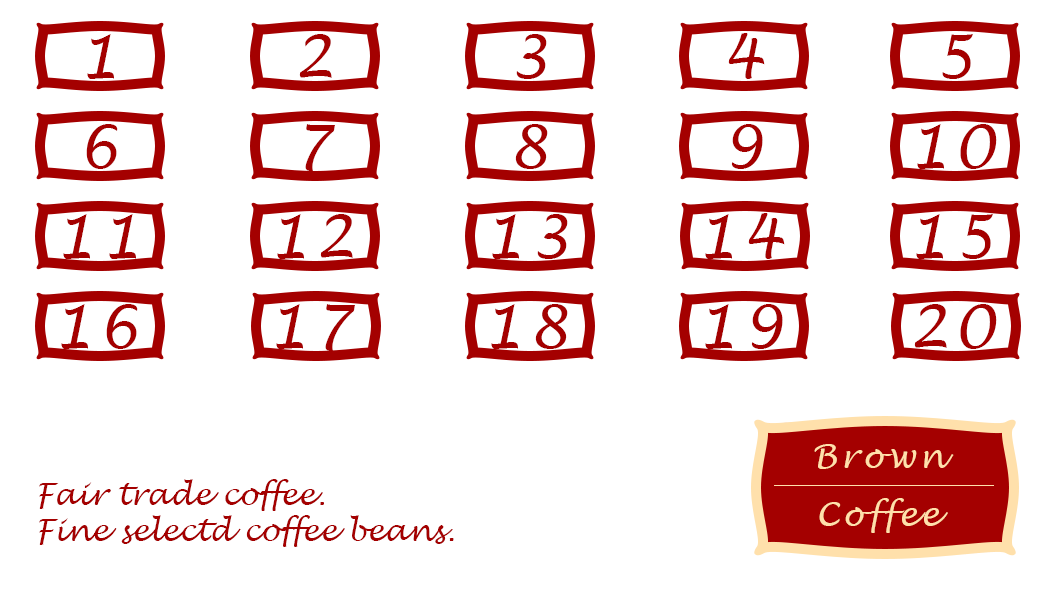
<style>
.page{position:relative;width:1063px;height:591px;background:#ffffff}
.page>*{position:absolute;margin:0}
.t1{font:60px "LucidaHandwriting-Italic";letter-spacing:0.1em;color:#a40000}
.t2{font:32.9px "LucidaHandwriting-Italic";letter-spacing:0.1em;color:#ffe0ab}
.t3{font:30px "LucidaHandwriting-Italic";color:#a40000}
</style>
<div class="page">
<p class="t1" style="left:87px;top:34px;width:27px;height:45px">1</p>
<p class="t1" style="left:299px;top:34px;width:33px;height:44px">2</p>
<p class="t1" style="left:516px;top:34px;width:31px;height:45px">3</p>
<p class="t1" style="left:728px;top:33px;width:37px;height:46px">4</p>
<p class="t1" style="left:942px;top:34px;width:31px;height:45px">5</p>
<p class="t1" style="left:86px;top:124px;width:32px;height:45px">6</p>
<p class="t1" style="left:305px;top:124px;width:30px;height:47px">7</p>
<p class="t1" style="left:515px;top:124px;width:33px;height:45px">8</p>
<p class="t1" style="left:731px;top:124px;width:32px;height:45px">9</p>
<p class="t1" style="left:917px;top:124px;width:80px;height:45px">10</p>
<p class="t1" style="left:63px;top:214px;width:73px;height:45px">11</p>
<p class="t1" style="left:277px;top:214px;width:76px;height:45px">12</p>
<p class="t1" style="left:492px;top:214px;width:76px;height:45px">13</p>
<p class="t1" style="left:705px;top:213px;width:80px;height:46px">14</p>
<p class="t1" style="left:916px;top:214px;width:77px;height:45px">15</p>
<p class="t1" style="left:61px;top:304px;width:77px;height:45px">16</p>
<p class="t1" style="left:276px;top:304px;width:79px;height:47px">17</p>
<p class="t1" style="left:491px;top:304px;width:77px;height:45px">18</p>
<p class="t1" style="left:705px;top:304px;width:78px;height:45px">19</p>
<p class="t1" style="left:914px;top:304px;width:83px;height:45px">20</p>
<p class="t2" style="left:814px;top:444px;width:140px;height:25px">Brown</p>
<p class="t3" style="left:39px;top:479px;width:415px;height:68px">Fair trade coffee.<br>Fine selectd coffee beans.</p>
<p class="t2" style="left:819px;top:498px;width:129px;height:35px">Coffee</p>
</div>
